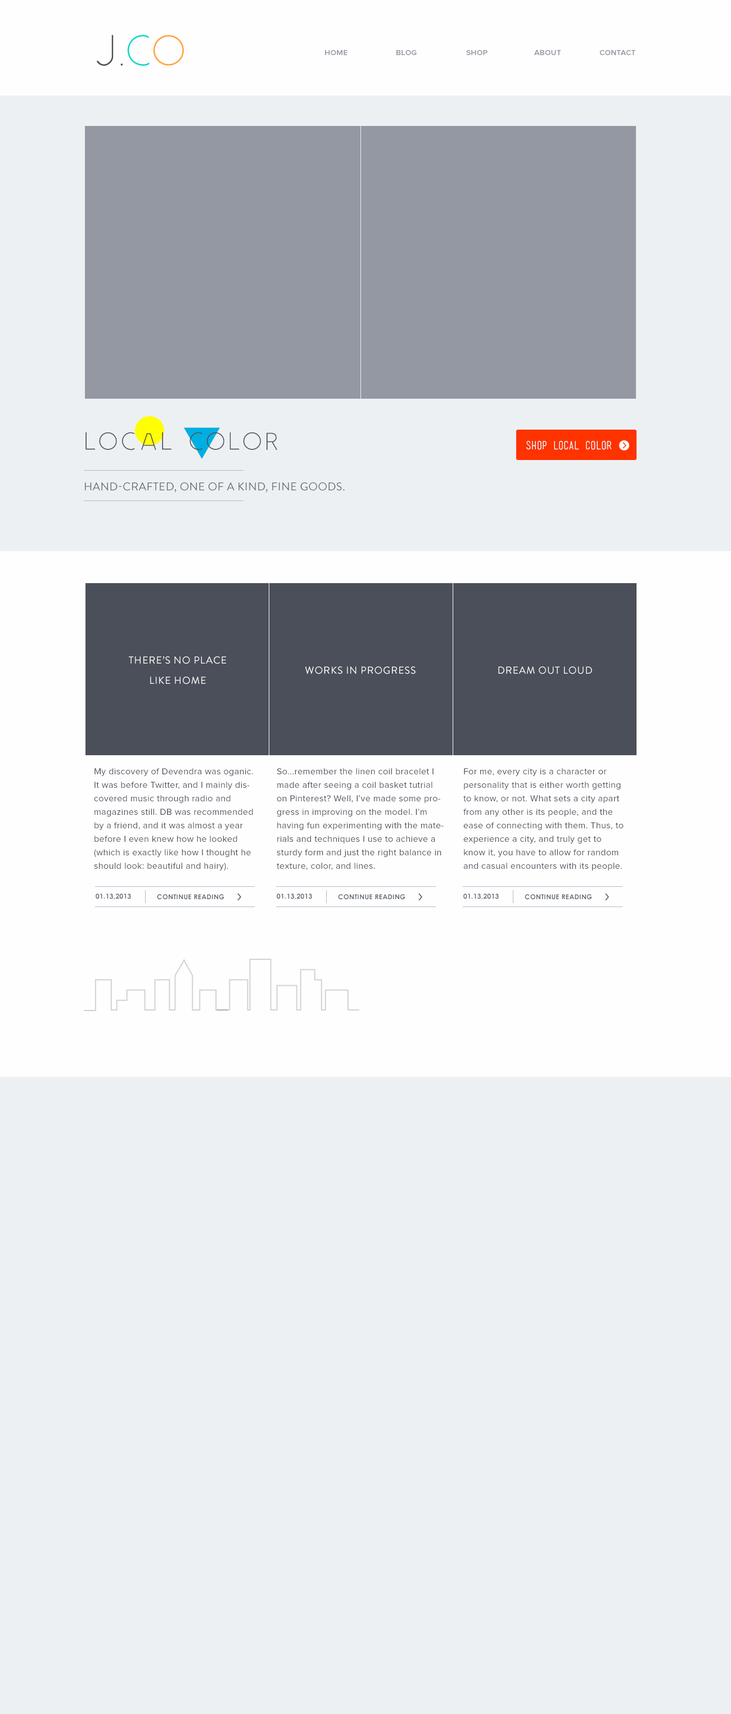
<style>
.page{position:relative;width:731px;height:1714px;background:#edf0f2}
.page>*{position:absolute;margin:0}
.t1{font:47.2px "Idler-Inner";letter-spacing:-0.1em;color:#4a4f59}
.t2{font:47.2px "Idler-Inner";letter-spacing:-0.15em;color:#00d9c5}
.t3{font:47.2px "Idler-Inner";letter-spacing:-0.15em;color:#ffa435}
.t4{font:9px "ProximaNova-Semibold";letter-spacing:0.01em;color:#9398a3;font-variant:small-caps}
.t5{font:27px "Idler-Inner";letter-spacing:-0.05em;color:#4a4f59;text-transform:uppercase}
.t6{font:11.2px "MenschRegular";color:#edf0f2;text-transform:uppercase}
.t7{font:11.2px "BrandonGrotesque-Regular";letter-spacing:0.025em;color:#616875;text-transform:uppercase}
.t8{font:10.1px/20.2px "BrandonGrotesque-Regular";letter-spacing:0.05em;color:#fefefe;text-transform:uppercase}
.t9{font:10.1px "BrandonGrotesque-Regular";letter-spacing:0.05em;color:#fefefe;text-transform:uppercase}
.t10{font:9px/13.5px "ProximaNova-Regular";letter-spacing:0.025em;color:#4a4f59}
.t11{font:6.8px "CenturyGothic-Bold";letter-spacing:0.025em;color:#616875;text-transform:uppercase}
</style>
<div class="page">
<p class="t1" style="left:96px;top:35px;width:27px;height:31px">j.</p>
<p class="t2" style="left:127px;top:35px;width:57px;height:31px">c<span class="t3">o</span></p>
<p class="t4" style="left:325px;top:50px;width:23px;height:5px">home</p>
<p class="t4" style="left:397px;top:50px;width:20px;height:5px">blog</p>
<p class="t4" style="left:466px;top:50px;width:22px;height:5px">shop</p>
<p class="t4" style="left:534px;top:50px;width:27px;height:5px">about</p>
<p class="t4" style="left:600px;top:50px;width:36px;height:5px">contact</p>
<p class="t5" style="left:86px;top:432px;width:191px;height:19px">local color</p>
<p class="t6" style="left:526px;top:441px;width:86px;height:9px">shop local color</p>
<p class="t7" style="left:85px;top:482px;width:260px;height:11px">hand-crafted, one of a kind, fine goods.</p>
<p class="t8" style="left:129px;top:656px;width:97px;height:29px;text-align:center">there’s no place<br>like home</p>
<p class="t9" style="left:305px;top:667px;width:111px;height:7px">works in progress</p>
<p class="t9" style="left:498px;top:667px;width:94px;height:7px">dream out loud</p>
<p class="t10" style="left:94px;top:768px;width:159px;height:103px">My discovery of Devendra was oganic. It was before Twitter, and I mainly discovered music through radio and magazines still. DB was recommended by a friend, and it was almost a year before I even knew how he looked (which is exactly like how I thought he should look: beautiful and hairy).</p>
<p class="t10" style="left:277px;top:768px;width:167px;height:102px">So...remember the linen coil bracelet I made after seeing a coil basket tutrial on Pinterest? Well, I’ve made some progress in improving on the model. I’m having fun experimenting with the materials and techniques I use to achieve a sturdy form and just the right balance in texture, color, and lines.</p>
<p class="t10" style="left:464px;top:768px;width:160px;height:103px">For me, every city is a character or personality that is either worth getting to know, or not. What sets a city apart from any other is its people, and the ease of connecting with them. Thus, to experience a city, and truly get to know it, you have to allow for random and casual encounters with its people.</p>
<p class="t11" style="left:96px;top:894px;width:35px;height:6px">01.13,2013</p>
<p class="t11" style="left:277px;top:894px;width:35px;height:6px">01.13,2013</p>
<p class="t11" style="left:464px;top:894px;width:35px;height:6px">01.13,2013</p>
<p class="t11" style="left:157px;top:894px;width:67px;height:6px">continue reading</p>
<p class="t11" style="left:338px;top:894px;width:68px;height:6px">continue reading</p>
<p class="t11" style="left:525px;top:894px;width:67px;height:6px">continue reading</p>
</div>
